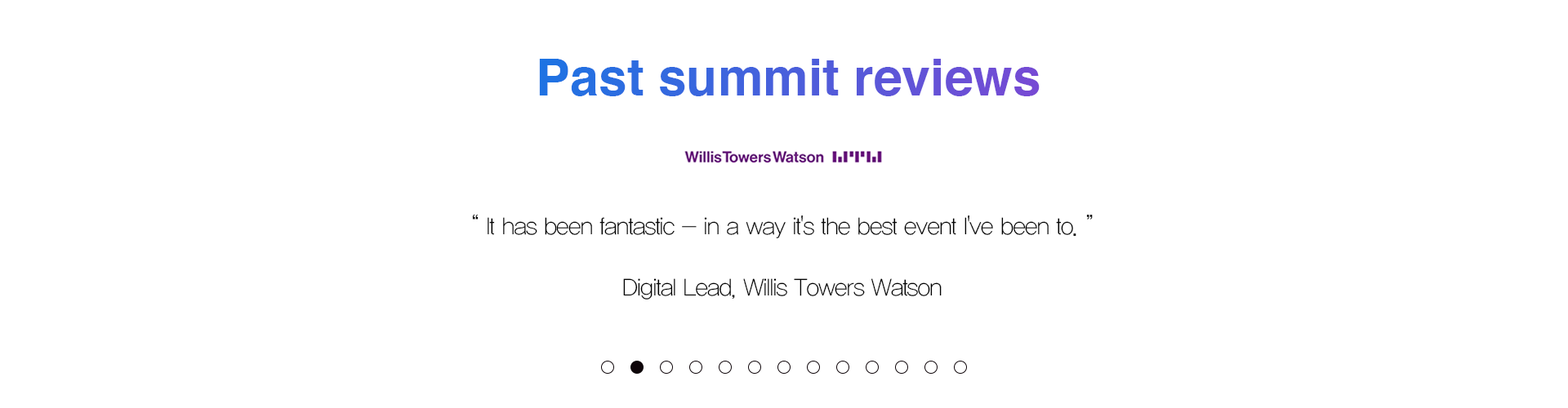
<style>
.page{position:relative;width:1568px;height:408px;background:#ffffff}
.page>*{position:absolute;margin:0}
.t1{font:51px "Helvetica-Bold"}
.t2{font:23.8px/30.6px "YDIYGO310";letter-spacing:-0.03em;color:#000000}
</style>
<div class="page">
<p class="t1" style="left:539px;top:59px;width:501px;height:37px">Past summit reviews</p>
<p class="t2" style="left:472px;top:214px;width:621px;height:86px;text-align:center">“ It has been fantastic - in a way it's the best event I've been to. ”<br> <br>Digital Lead, Willis Towers Watson</p>
</div>
